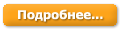
<style>
.page{position:relative;width:120px;height:30px}
.page>*{position:absolute;margin:0}
.t1{font:12px "Verdana-Bold";letter-spacing:-0.02em;color:#fffdf9}
</style>
<div class="page">
<p class="t1" style="left:18px;top:9px;width:85px;height:13px">Подробнее...</p>
</div>
